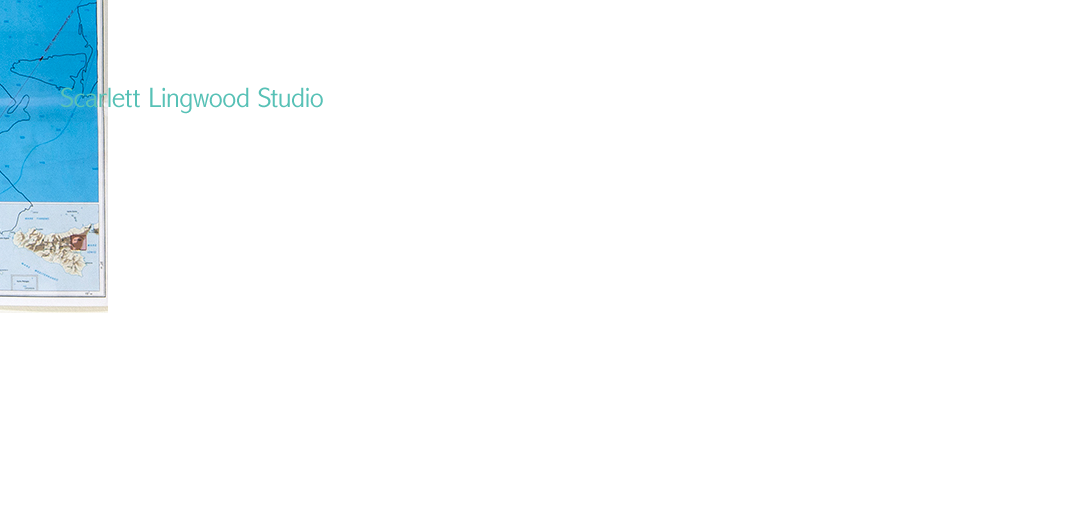
<style>
.page{position:relative;width:1080px;height:512px;background:#ffffff}
.page>*{position:absolute;margin:0}
.t1{font:28.3px "AbadiMT-CondensedLight";color:#57c1b6;scale:1.17 1}
</style>
<div class="page">
<p class="t1" style="left:61px;top:87px;width:262px;height:27px">Scarlett Lingwood Studio</p>
</div>
